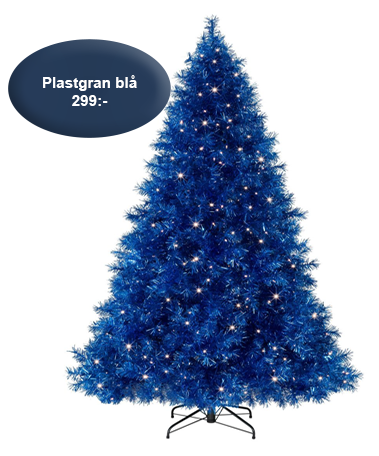
<style>
.page{position:relative;width:379px;height:456px;background:#ffffff}
.page>*{position:absolute;margin:0}
.t1{font:15.1px "Arial-BoldMT";color:#ffffff}
</style>
<div class="page">
<p class="t1" style="left:43px;top:75px;width:94px;height:31px;text-align:center">Plastgran blå<br>299:-</p>
</div>
